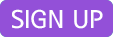
<style>
.page{position:relative;width:113px;height:37px;background:#9350d8}
.page>*{position:absolute;margin:0}
.t1{font:25px "SeoulNamsanB";color:#ffffff}
</style>
<div class="page">
<p class="t1" style="left:12px;top:9px;width:91px;height:20px">SIGN UP</p>
</div>
